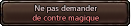
<style>
.page{position:relative;width:131px;height:26px}
.page>*{position:absolute;margin:0}
.t1{font:8px "LaoUI"}
</style>
<div class="page">
<p class="t1" style="left:32px;top:5px;width:67px;height:18px;text-align:center">Ne pas demander<br>de contre magique</p>
</div>
